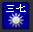
<style>
.page{position:relative;width:33px;height:32px;background:#000090}
.page>*{position:absolute;margin:0}
.t1{font:10.4px "SimSun";color:#ffffff}
</style>
<div class="page">
<p class="t1" style="left:6px;top:4px;width:20px;height:8px">三七</p>
</div>
